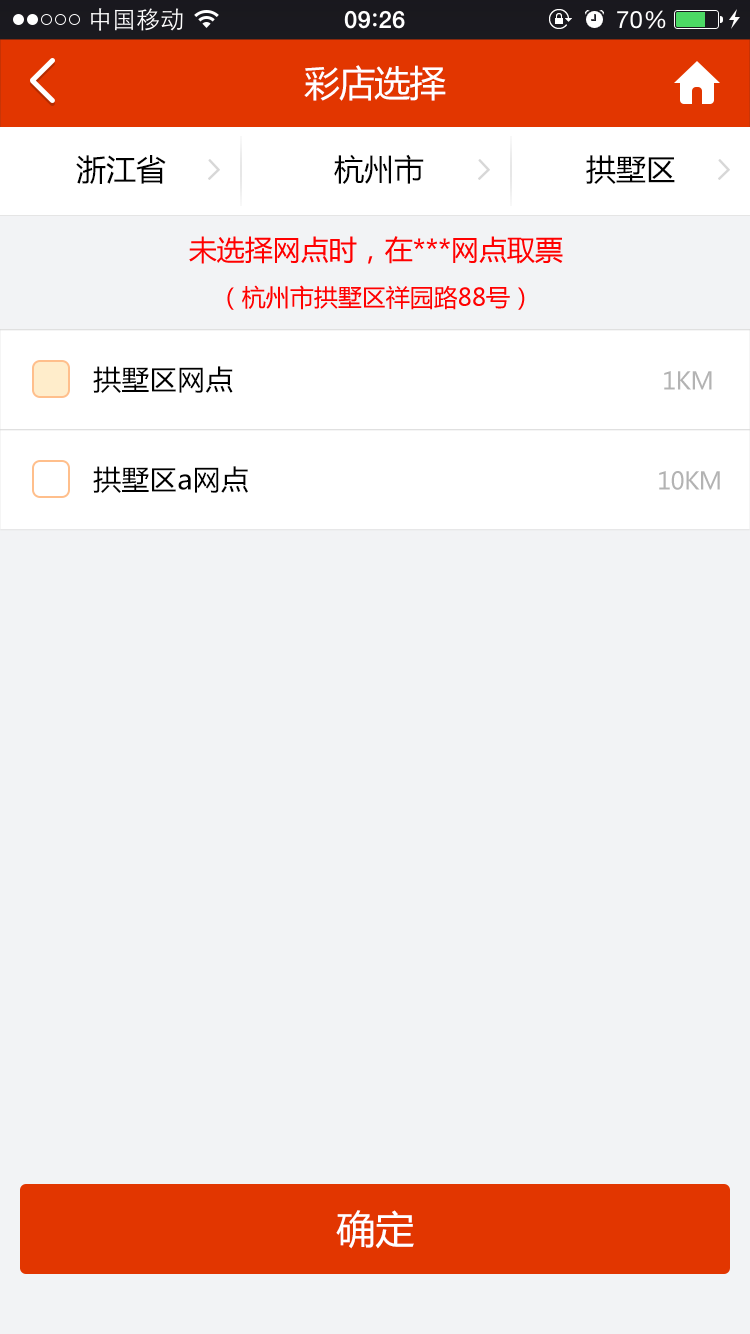
<style>
.page{position:relative;width:750px;height:1334px;background:#f2f3f5}
.page>*{position:absolute;margin:0}
.t1{font:36px "MicrosoftYaHei";letter-spacing:-0.025em;color:#ffffff}
.t2{font:30px "MicrosoftYaHei";color:#000000}
.t3{font:28px "MicrosoftYaHei";color:#ff0000}
.t4{font:24px "MicrosoftYaHei";color:#ff0000}
.t5{font:28px "MicrosoftYaHei";color:#000000}
.t6{font:24px "MicrosoftYaHei";letter-spacing:-0.025em;color:#b3b3b3}
.t7{font:39px "MicrosoftYaHei";color:#ffffff}
</style>
<div class="page">
<p class="t1" style="left:304px;top:65px;width:142px;height:36px">彩店选择</p>
<p class="t2" style="left:76px;top:155px;width:90px;height:29px">浙江省</p>
<p class="t2" style="left:334px;top:154px;width:90px;height:30px">杭州市</p>
<p class="t2" style="left:586px;top:155px;width:89px;height:29px">拱墅区</p>
<p class="t3" style="left:189px;top:236px;width:374px;height:28px">未选择网点时，在***网点取票</p>
<p class="t4" style="left:227px;top:285px;width:298px;height:25px">（杭州市拱墅区祥园路88号）</p>
<p class="t5" style="left:93px;top:366px;width:140px;height:27px">拱墅区网点</p>
<p class="t6" style="left:664px;top:371px;width:48px;height:19px">1KM</p>
<p class="t5" style="left:93px;top:466px;width:155px;height:27px">拱墅区a网点</p>
<p class="t6" style="left:659px;top:471px;width:61px;height:19px">10KM</p>
<p class="t7" style="left:336px;top:1210px;width:78px;height:39px">确定</p>
</div>
